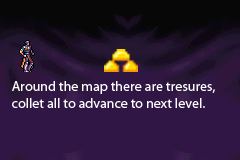
<style>
.page{position:relative;width:240px;height:160px;background:#301644}
.page>*{position:absolute;margin:0}
.t1{font:14px "MyriadPro-Regular";color:#fefcfc}
</style>
<div class="page">
<p class="t1" style="left:12px;top:81px;width:203px;height:27px">Around the map there are tresures, collet all to advance to next level.</p>
</div>
